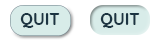
<style>
.page{position:relative;width:160px;height:40px;background:#ffffff}
.page>*{position:absolute;margin:0}
.t1{font:16.7px "#9Slide03QuicksandBold-Bold";color:#1c3442;text-transform:uppercase}
</style>
<div class="page">
<p class="t1" style="left:20px;top:13px;width:40px;height:15px">quit</p>
<p class="t1" style="left:100px;top:13px;width:40px;height:15px">quit</p>
</div>
